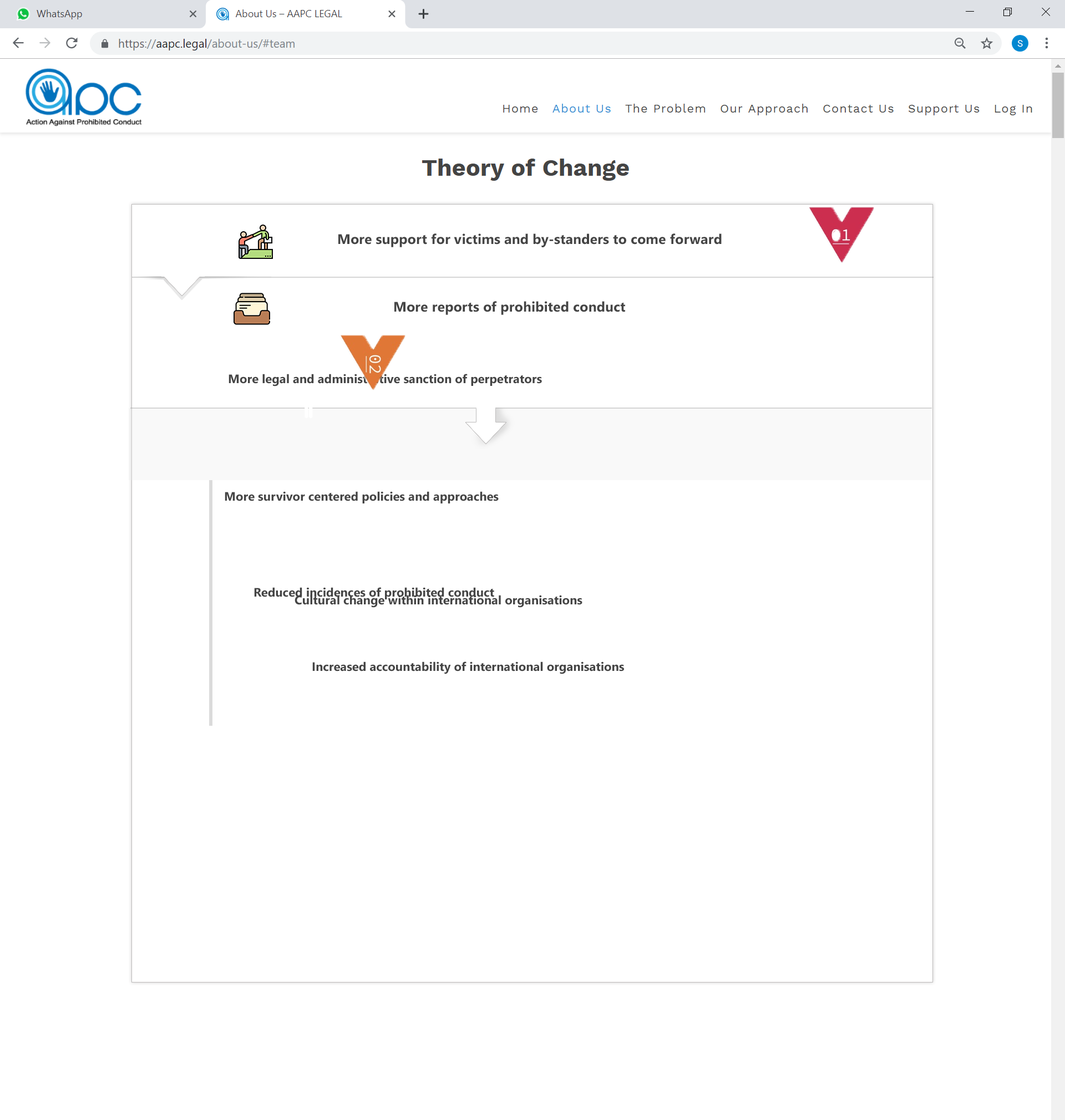
<style>
.page{position:relative;width:1065px;height:1120px;background:#ffffff}
.page>*{position:absolute;margin:0}
.t1{font:13.9px "SegoeUI-Bold";color:#444444}
.t2{font:12.2px "SegoeUI-Bold";color:#444444}
</style>
<div class="page">
<p class="t1" style="left:338px;top:233px;width:383px;height:14px">More support for victims and by-standers to come forward</p>
<p class="t1" style="left:394px;top:301px;width:231px;height:14px">More reports of prohibited conduct</p>
<p class="t2" style="left:228px;top:374px;width:314px;height:12px">More legal and administrative sanction of perpetrators</p>
<p class="t2" style="left:225px;top:491px;width:273px;height:12px">More survivor centered policies and approaches</p>
<p class="t2" style="left:254px;top:587px;width:240px;height:12px">Reduced incidences of prohibited conduct</p>
<p class="t2" style="left:294px;top:595px;width:288px;height:13px">Cultural change within international organisations</p>
<p class="t2" style="left:312px;top:662px;width:312px;height:12px">Increased accountability of international organisations</p>
</div>
